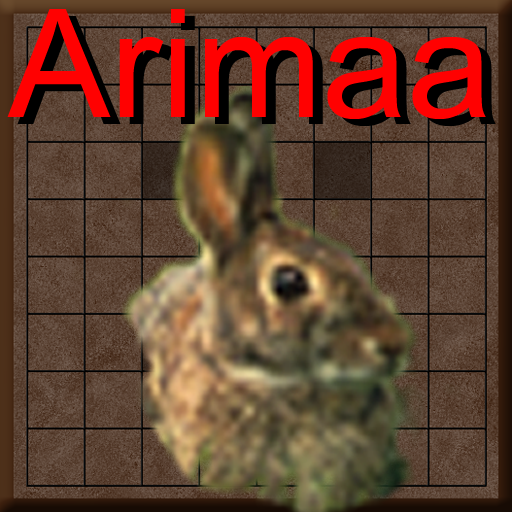
<style>
.page{position:relative;width:512px;height:512px}
.page>*{position:absolute;margin:0}
.t1{font:150px "ArialMT";color:#ff0101}
.t2{font:150px "ArialMT";color:#000000}
</style>
<div class="page">
<p class="t1" style="left:7px;top:9px;width:479px;height:110px">Arimaa</p>
<p class="t2" style="left:17px;top:16px;width:479px;height:110px">Arimaa</p>
</div>
